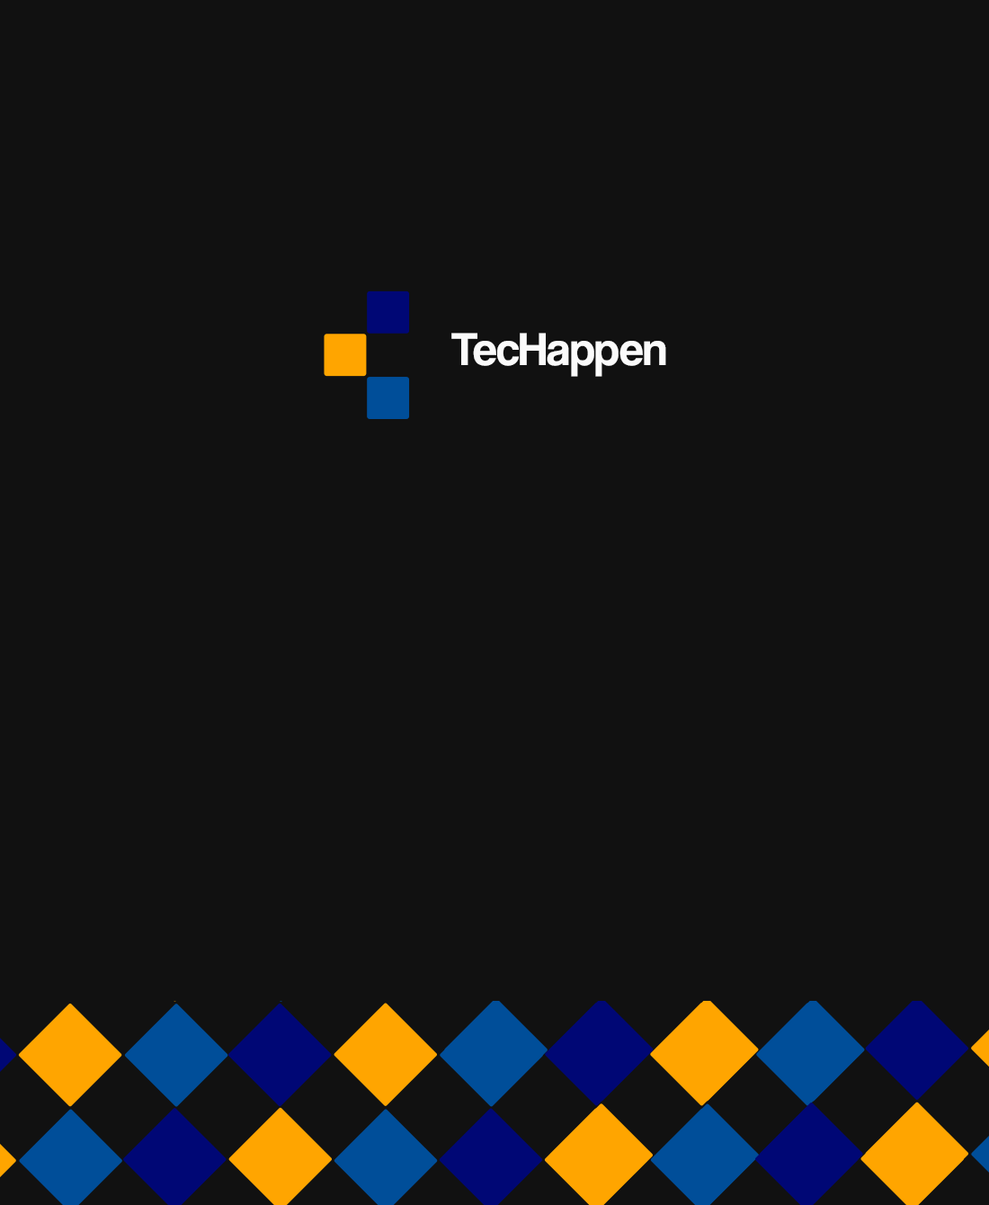
<style>
.page{position:relative;width:989px;height:1205px;background:#111111}
.page>*{position:absolute;margin:0}
.t1{font:48.1px "CoolveticaRg-Regular";letter-spacing:-0.005em;color:#fbfbfb}
</style>
<div class="page">
<p class="t1" style="left:452px;top:333px;width:214px;height:44px">TecHappen</p>
</div>
